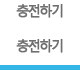
<style>
.page{position:relative;width:80px;height:70px;background:#ffffff}
.page>*{position:absolute;margin:0}
.t1{font:14px "MalgunGothicRegular";letter-spacing:-0.15em;color:#6e6e6e;font-weight:bold;scale:0.95 1}
</style>
<div class="page">
<p class="t1" style="left:16px;top:4px;width:47px;height:14px">충전하기</p>
<p class="t1" style="left:16px;top:39px;width:47px;height:14px">충전하기</p>
</div>
